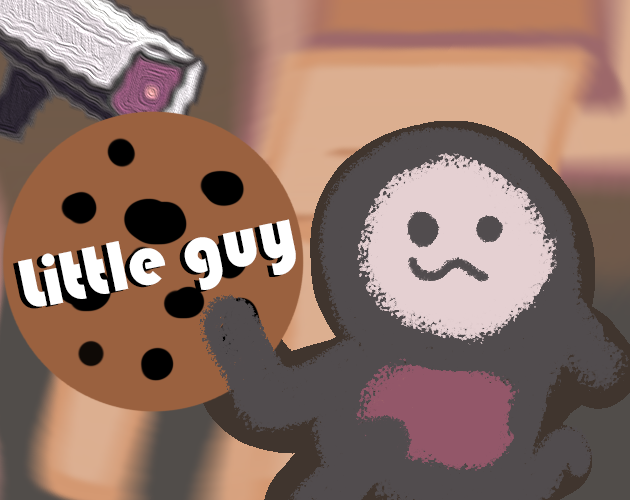
<style>
.page{position:relative;width:630px;height:500px}
.page>*{position:absolute;margin:0}
.t1{font:72.9px "Bauhaus93";scale:0.95 1}
.t2{font:72.9px "Bauhaus93";color:#ffffff;scale:0.95 1}
</style>
<div class="page">
<p class="t1" style="left:13px;top:221px;width:278px;height:88px;rotate:-12deg">Little guy</p>
<p class="t2" style="left:18px;top:219px;width:278px;height:88px;rotate:-12deg">Little guy</p>
</div>
